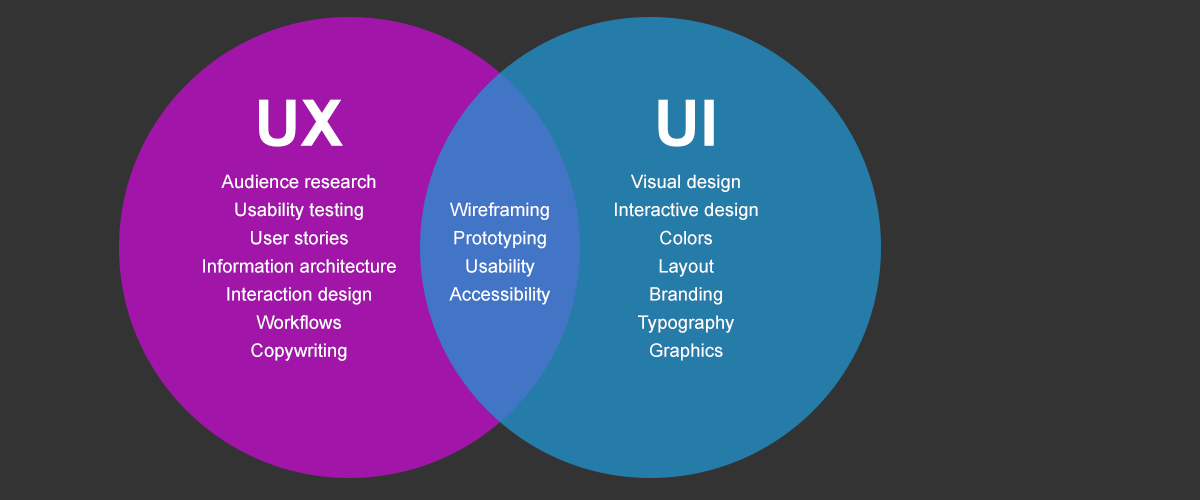
<style>
.page{position:relative;width:1200px;height:500px;background:#333333}
.page>*{position:absolute;margin:0}
.t1{font:64px "Arial-BoldMT";color:#ffffff}
.t2{font:18.6px "ArialMT";color:#ffffff}
</style>
<div class="page">
<p class="t1" style="left:259px;top:99px;width:84px;height:48px">UX</p>
<p class="t1" style="left:658px;top:99px;width:56px;height:48px">UI</p>
<p class="t2" style="left:203px;top:174px;width:193px;height:187px;text-align:center">Audience research<br>Usability testing<br>User stories<br>Information architecture<br>Interaction design<br>Workflows<br>Copywriting</p>
<p class="t2" style="left:615px;top:174px;width:143px;height:187px;text-align:center">Visual design<br>Interactive design<br>Colors<br>Layout<br>Branding<br>Typography<br>Graphics</p>
<p class="t2" style="left:449px;top:202px;width:101px;height:103px;text-align:center">Wireframing<br>Prototyping<br>Usability<br>Accessibility</p>
</div>
